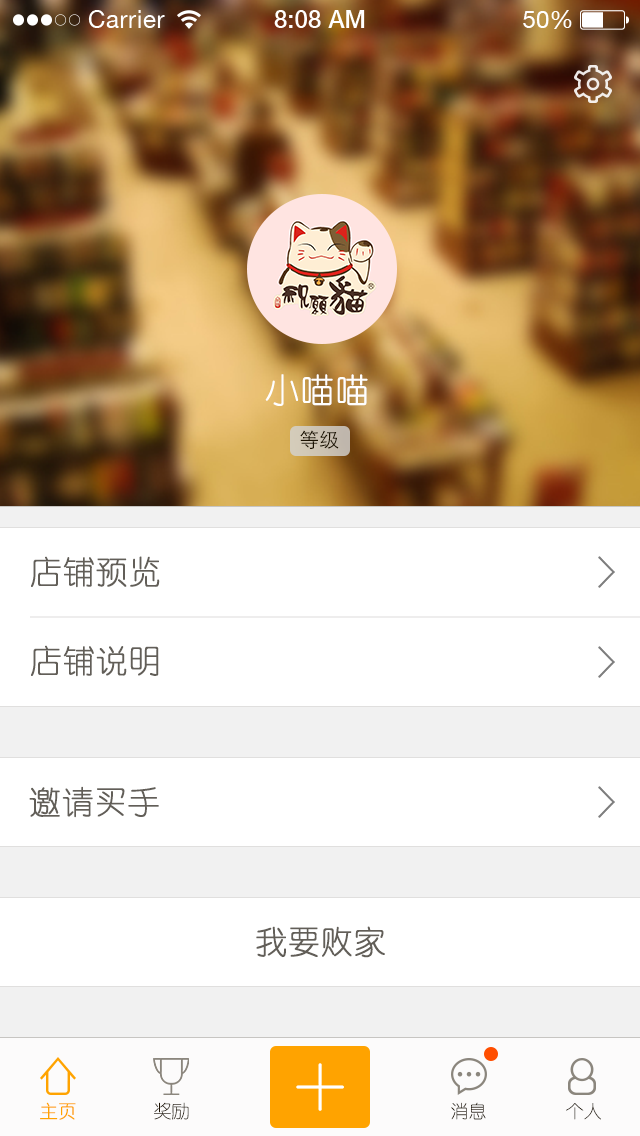
<style>
.page{position:relative;width:640px;height:1136px;background:#ffffff}
.page>*{position:absolute;margin:0}
.t1{font:34px "YouYuan";color:#ffffff;font-weight:bold}
.t2{font:20px "STHeitiSC-Light";color:#1b1100;text-transform:uppercase}
.t3{font:32px "YouYuan";color:#625e58;font-weight:bold}
.t4{font:18px "YouYuan";color:#ffa300;font-weight:bold}
.t5{font:18px "YouYuan";color:#1b1000;text-transform:uppercase}
.t6{font:18px "YouYuan";text-transform:uppercase}
</style>
<div class="page">
<p class="t1" style="left:265px;top:374px;width:103px;height:32px">小喵喵</p>
<p class="t2" style="left:300px;top:430px;width:39px;height:19px">等级</p>
<p class="t3" style="left:31px;top:556px;width:129px;height:32px">店铺预览</p>
<p class="t3" style="left:31px;top:645px;width:128px;height:32px">店铺说明</p>
<p class="t3" style="left:29px;top:786px;width:130px;height:32px">邀请买手</p>
<p class="t3" style="left:256px;top:926px;width:129px;height:32px">我要败家</p>
<p class="t4" style="left:40px;top:1102px;width:36px;height:18px">主页</p>
<p class="t5" style="left:154px;top:1102px;width:35px;height:18px">奖励</p>
<p class="t6" style="left:451px;top:1102px;width:35px;height:18px">消息</p>
<p class="t6" style="left:566px;top:1103px;width:35px;height:17px">个人</p>
</div>
